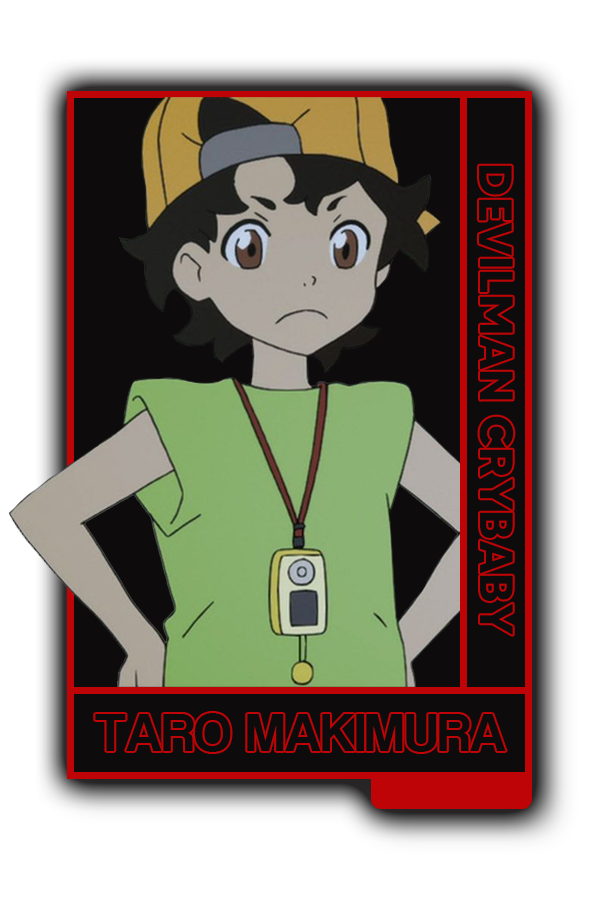
<style>
.page{position:relative;width:600px;height:900px;background:#0d0b0b}
.page>*{position:absolute;margin:0}
.t1{font:46.8px "MADETOMMY-Bold";color:#0d0b0b}
.t2{font:56.3px "CoolveticaRg-Regular";color:#0d0b0b}
</style>
<div class="page">
<p class="t1" style="left:479px;top:165px;width:35px;height:470px;rotate:90deg">DEVILMAN CRYBABY</p>
<p class="t2" style="left:95px;top:713px;width:411px;height:39px">TARO MAKIMURA</p>
</div>
